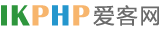
<style>
.page{position:relative;width:160px;height:30px;background:#ffffff}
.page>*{position:absolute;margin:0}
.t1{font:30px "BritannicBold";letter-spacing:0.05em;color:#2e963d}
.t2{font:30px "BritannicBold";letter-spacing:0.05em;color:#f7b56d}
.t3{font:30px "BritannicBold";letter-spacing:0.05em;color:#2496cd}
.t4{font:21px "MicrosoftYaHei";letter-spacing:0.1em;color:#6b6b6b}
</style>
<div class="page">
<p class="t1" style="left:1px;top:5px;width:89px;height:21px">IK<span class="t2">P</span><span class="t3">H</span><span class="t2">P</span></p>
<p class="t4" style="left:93px;top:5px;width:66px;height:21px">爱客网</p>
</div>
